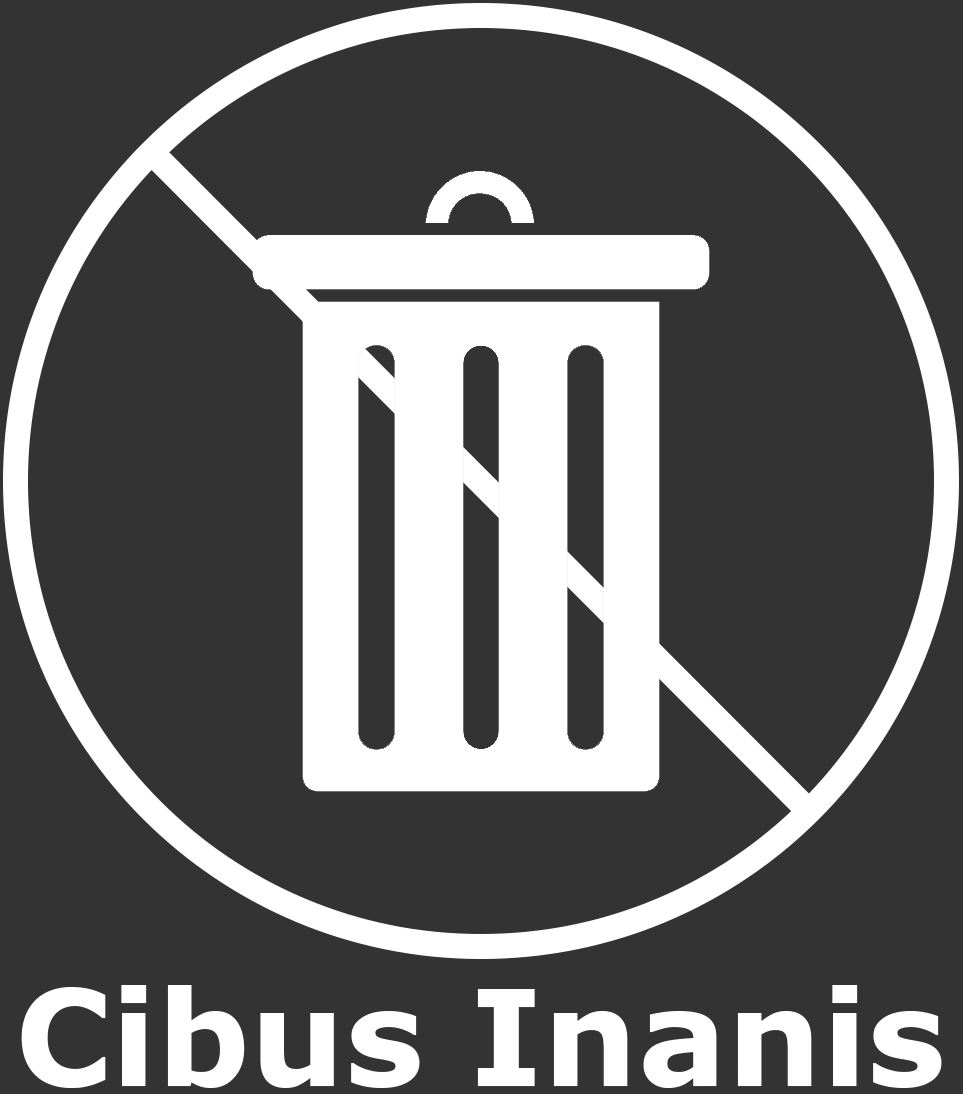
<style>
.page{position:relative;width:963px;height:1094px;background:#333333}
.page>*{position:absolute;margin:0}
.t1{font:133.3px "Verdana-Bold";color:#ffffff}
</style>
<div class="page">
<p class="t1" style="left:21px;top:985px;width:921px;height:103px">Cibus Inanis</p>
</div>
